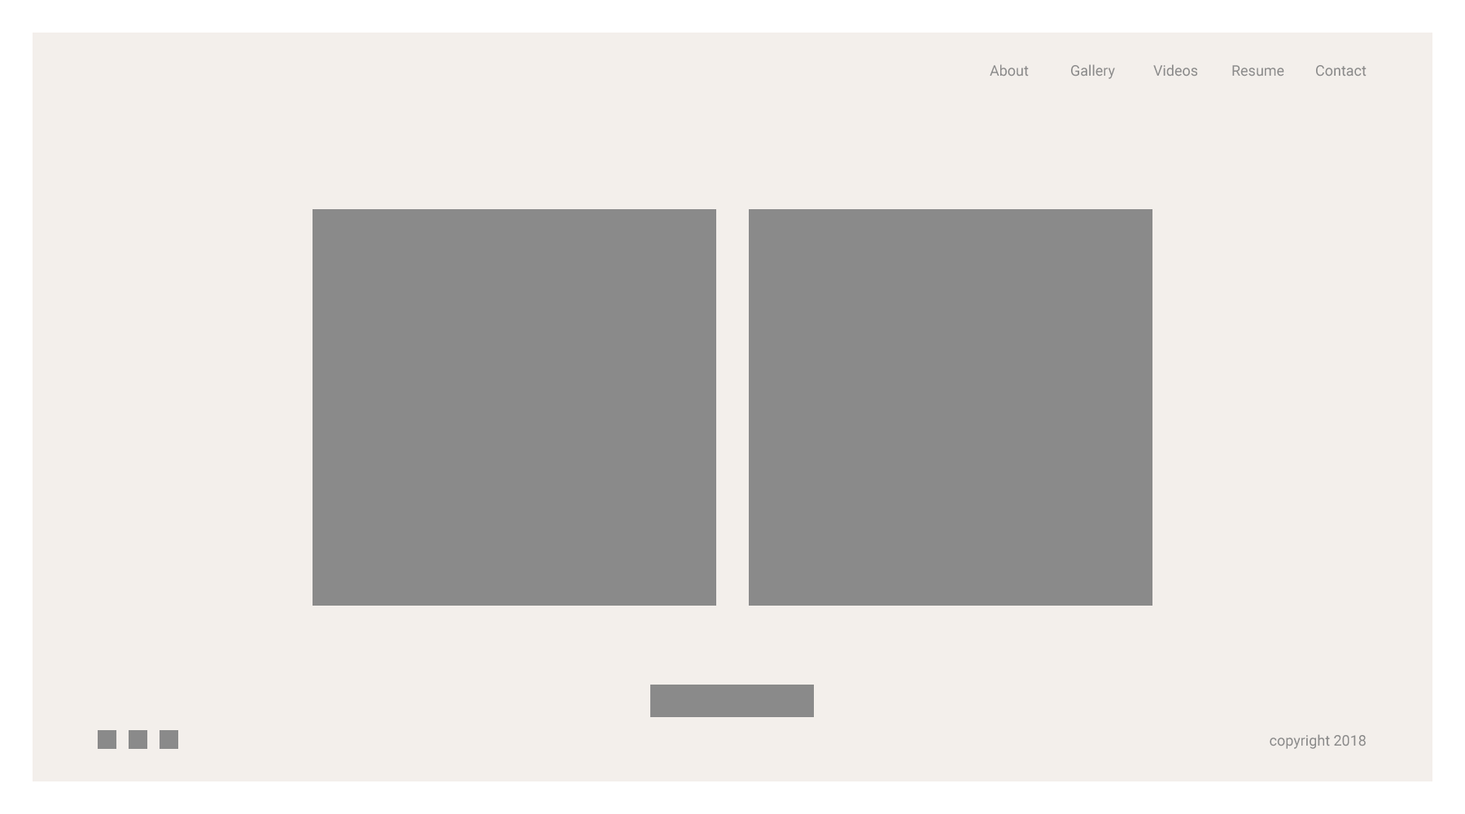
<style>
.page{position:relative;width:1465px;height:814px;background:#f3efeb}
.page>*{position:absolute;margin:0}
.t1{font:14.7px "Roboto-Regular";color:#8a8a8a}
</style>
<div class="page">
<p class="t1" style="left:990px;top:64px;width:39px;height:13px">About</p>
<p class="t1" style="left:1071px;top:64px;width:44px;height:15px">Gallery</p>
<p class="t1" style="left:1153px;top:64px;width:45px;height:13px">Videos</p>
<p class="t1" style="left:1232px;top:65px;width:52px;height:12px">Resume</p>
<p class="t1" style="left:1316px;top:65px;width:51px;height:12px">Contact</p>
<p class="t1" style="left:1270px;top:734px;width:96px;height:15px">copyright 2018</p>
</div>
